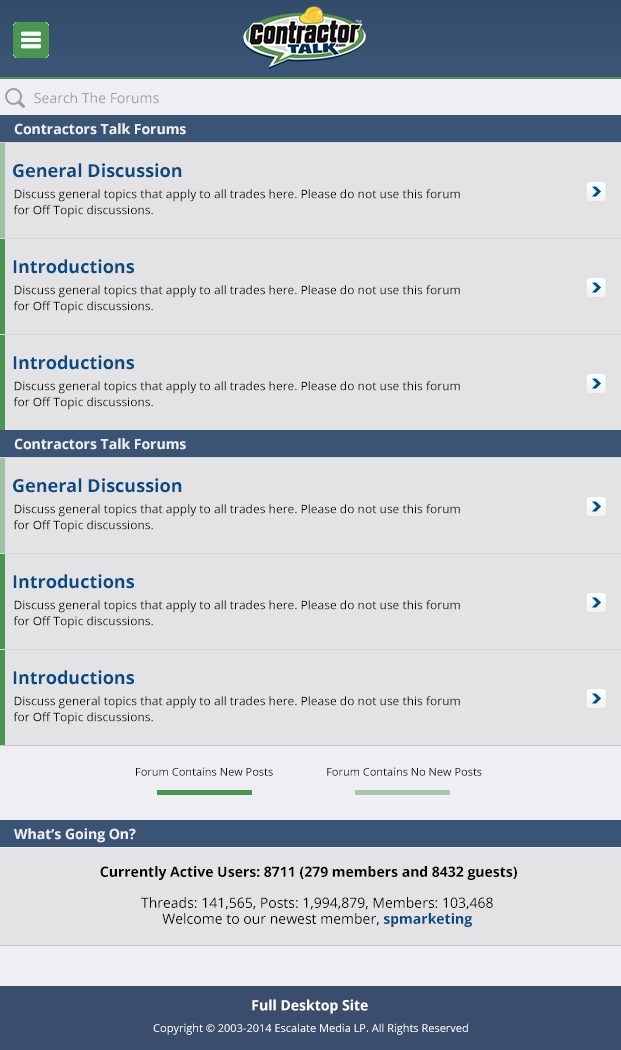
<style>
.page{position:relative;width:621px;height:1050px;background:#e3e3e6}
.page>*{position:absolute;margin:0}
.t1{font:14px "OpenSans";color:#9f9f9f}
.t2{font:14px "OpenSans-Bold";color:#efeff3}
.t3{font:18px "OpenSans-Bold";color:#084b82}
.t4{font:12px/16px "OpenSans";color:#010101}
.t5{font:11px "OpenSans";color:#000000}
.t6{font:14px "OpenSans-Bold";color:#000000}
.t7{font:14px/16px "OpenSans";color:#000000}
.t8{font:14px/16px "OpenSans-Bold";color:#084b82}
.t9{font:14px "OpenSans-Bold";color:#ffffff}
.t10{font:11px "OpenSans";color:#ffffff}
</style>
<div class="page">
<p class="t1" style="left:34px;top:92px;width:125px;height:12px">Search The Forums</p>
<p class="t2" style="left:14px;top:123px;width:172px;height:12px">Contractors Talk Forums</p>
<p class="t3" style="left:13px;top:163px;width:169px;height:15px">General Discussion</p>
<p class="t4" style="left:13px;top:189px;width:447px;height:29px">Discuss general topics that apply to all trades here. Please do not use this forum <br>for Off Topic discussions.</p>
<p class="t3" style="left:13px;top:259px;width:121px;height:15px">Introductions</p>
<p class="t4" style="left:13px;top:285px;width:447px;height:29px">Discuss general topics that apply to all trades here. Please do not use this forum <br>for Off Topic discussions.</p>
<p class="t3" style="left:13px;top:355px;width:121px;height:15px">Introductions</p>
<p class="t4" style="left:13px;top:381px;width:447px;height:29px">Discuss general topics that apply to all trades here. Please do not use this forum <br>for Off Topic discussions.</p>
<p class="t2" style="left:14px;top:438px;width:172px;height:12px">Contractors Talk Forums</p>
<p class="t3" style="left:13px;top:478px;width:169px;height:15px">General Discussion</p>
<p class="t4" style="left:13px;top:504px;width:447px;height:29px">Discuss general topics that apply to all trades here. Please do not use this forum <br>for Off Topic discussions.</p>
<p class="t3" style="left:13px;top:574px;width:121px;height:15px">Introductions</p>
<p class="t4" style="left:13px;top:600px;width:447px;height:29px">Discuss general topics that apply to all trades here. Please do not use this forum <br>for Off Topic discussions.</p>
<p class="t3" style="left:13px;top:670px;width:121px;height:15px">Introductions</p>
<p class="t4" style="left:13px;top:696px;width:447px;height:29px">Discuss general topics that apply to all trades here. Please do not use this forum <br>for Off Topic discussions.</p>
<p class="t5" style="left:136px;top:767px;width:137px;height:9px">Forum Contains New Posts</p>
<p class="t5" style="left:327px;top:767px;width:155px;height:9px">Forum Contains No New Posts</p>
<p class="t2" style="left:14px;top:828px;width:122px;height:15px">What’s Going On?</p>
<p class="t6" style="left:100px;top:866px;width:417px;height:14px">Currently Active Users: 8711 (279 members and 8432 guests)</p>
<p class="t7" style="left:141px;top:897px;width:352px;height:30px;text-align:center">Threads: 141,565, Posts: 1,994,879, Members: 103,468<br>Welcome to our newest member, <span class="t8">spmarketing</span></p>
<p class="t9" style="left:252px;top:999px;width:116px;height:15px">Full Desktop Site</p>
<p class="t10" style="left:153px;top:1023px;width:315px;height:12px">Copyright © 2003-2014 Escalate Media LP. All Rights Reserved</p>
</div>
